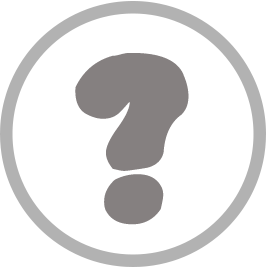
<style>
.page{position:relative;width:267px;height:267px;background:#ffffff}
.page>*{position:absolute;margin:0}
.t1{font:204px "BubbleGum";letter-spacing:-0.02em;color:#858080;font-weight:bold}
</style>
<div class="page">
<p class="t1" style="left:75px;top:53px;width:114px;height:172px">?</p>
</div>
